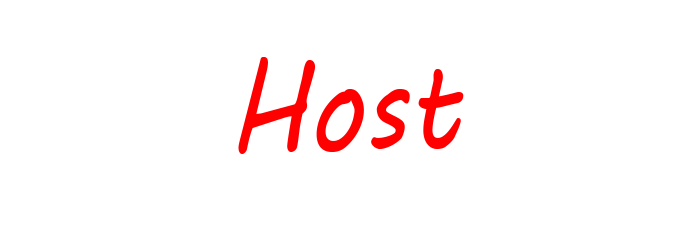
<style>
.page{position:relative;width:700px;height:250px;background:#ffffff}
.page>*{position:absolute;margin:0}
.t1{font:125px "MVBoli";color:#ff0000;scale:0.84 1}
</style>
<div class="page">
<p class="t1" style="left:238px;top:57px;width:226px;height:97px">Host</p>
</div>
